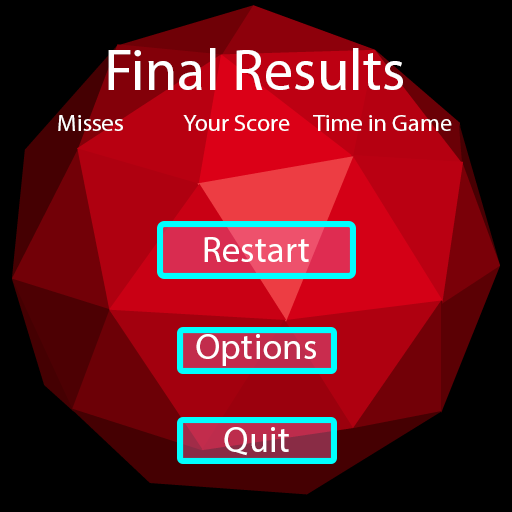
<style>
.page{position:relative;width:512px;height:512px;background:#000000}
.page>*{position:absolute;margin:0}
.t1{font:58px "MyriadPro-Regular";color:#ffffff}
.t2{font:23.9px "MyriadPro-Regular";color:#ffffff}
.t3{font:36.6px "MyriadPro-Regular";color:#ffffff}
</style>
<div class="page">
<p class="t1" style="left:108px;top:48px;width:295px;height:42px">Final Results</p>
<p class="t2" style="left:58px;top:115px;width:65px;height:16px">Misses</p>
<p class="t2" style="left:183px;top:115px;width:107px;height:16px">Your Score</p>
<p class="t2" style="left:313px;top:115px;width:139px;height:16px">Time in Game</p>
<p class="t3" style="left:204px;top:237px;width:105px;height:25px">Restart</p>
<p class="t3" style="left:196px;top:334px;width:120px;height:32px">Options</p>
<p class="t3" style="left:224px;top:427px;width:65px;height:29px">Quit</p>
</div>
